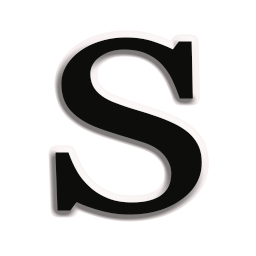
<style>
.page{position:relative;width:256px;height:256px;background:#ffffff}
.page>*{position:absolute;margin:0}
.t1{font:241.6px "Georgia";letter-spacing:-0.082em;color:#0d0d0c;font-weight:bold;scale:1.26 1}
</style>
<div class="page">
<p class="t1" style="left:55px;top:37px;width:147px;height:178px">S</p>
</div>
